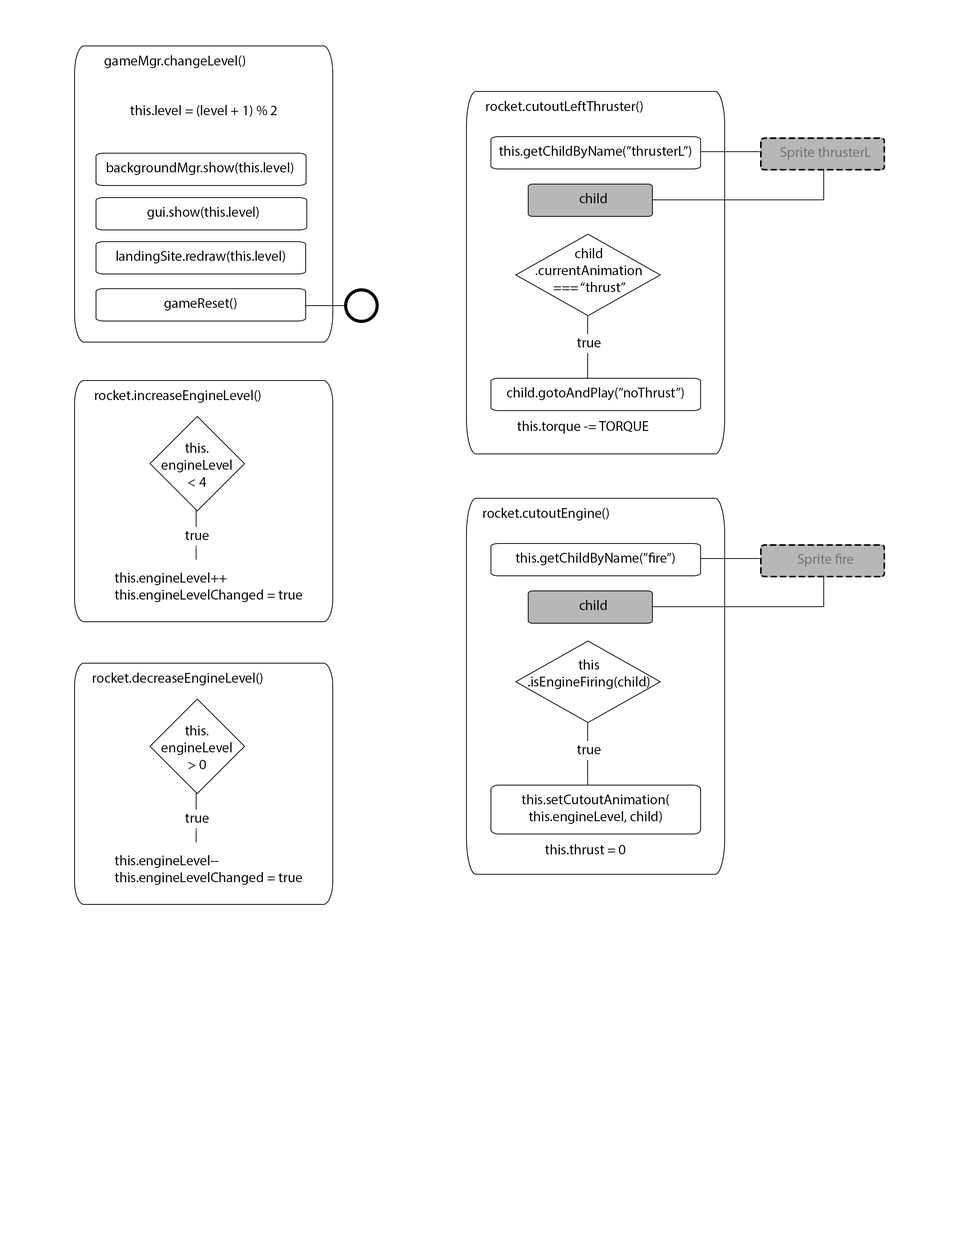
<style>
.page{position:relative;width:960px;height:1242px;background:#ffffff}
.page>*{position:absolute;margin:0}
.t1{font:14.1px "MyriadPro-Regular";color:#000000}
.t2{font:14.1px "MyriadPro-Regular";color:#737373}
</style>
<div class="page">
<p class="t1" style="left:104px;top:55px;width:141px;height:13px">gameMgr.changeLevel()</p>
<p class="t1" style="left:486px;top:101px;width:157px;height:12px">rocket.cutoutLeftThruster()</p>
<p class="t1" style="left:130px;top:105px;width:147px;height:12px">this.level = (level + 1) % 2</p>
<p class="t1" style="left:499px;top:146px;width:192px;height:13px">this.getChildByName(”thrusterL”)</p>
<p class="t2" style="left:780px;top:147px;width:91px;height:13px">Sprite thrusterL</p>
<p class="t1" style="left:107px;top:162px;width:186px;height:13px">backgroundMgr.show(this.level)</p>
<p class="t1" style="left:579px;top:193px;width:28px;height:10px">child</p>
<p class="t1" style="left:147px;top:207px;width:112px;height:12px">gui.show(this.level)</p>
<p class="t1" style="left:116px;top:251px;width:169px;height:13px">landingSite.redraw(this.level)</p>
<p class="t1" style="left:536px;top:248px;width:106px;height:44px;text-align:center">child<br>.currentAnimation<br>=== “thrust”</p>
<p class="t1" style="left:164px;top:298px;width:72px;height:13px">gameReset()</p>
<p class="t1" style="left:577px;top:338px;width:24px;height:9px">true</p>
<p class="t1" style="left:95px;top:390px;width:165px;height:13px">rocket.increaseEngineLevel()</p>
<p class="t1" style="left:507px;top:387px;width:177px;height:14px">child.gotoAndPlay(”noThrust”)</p>
<p class="t1" style="left:517px;top:421px;width:131px;height:13px">this.torque -= TORQUE</p>
<p class="t1" style="left:161px;top:443px;width:71px;height:44px;text-align:center">this.<br>engineLevel<br>&lt; 4</p>
<p class="t1" style="left:483px;top:508px;width:126px;height:13px">rocket.cutoutEngine()</p>
<p class="t1" style="left:185px;top:531px;width:24px;height:9px">true</p>
<p class="t1" style="left:516px;top:553px;width:159px;height:13px">this.getChildByName(”fire”)</p>
<p class="t2" style="left:798px;top:554px;width:55px;height:13px">Sprite fire</p>
<p class="t1" style="left:115px;top:573px;width:187px;height:29px">this.engineLevel++<br>this.engineLevelChanged = true</p>
<p class="t1" style="left:579px;top:600px;width:28px;height:10px">child</p>
<p class="t1" style="left:528px;top:660px;width:121px;height:29px;text-align:center">this<br>.isEngineFiring(child)</p>
<p class="t1" style="left:93px;top:673px;width:169px;height:12px">rocket.decreaseEngineLevel()</p>
<p class="t1" style="left:161px;top:725px;width:71px;height:44px;text-align:center">this.<br>engineLevel<br>&gt; 0</p>
<p class="t1" style="left:577px;top:745px;width:24px;height:9px">true</p>
<p class="t1" style="left:522px;top:794px;width:147px;height:30px;text-align:center">this.setCutoutAnimation(<br>this.engineLevel, child)</p>
<p class="t1" style="left:185px;top:813px;width:24px;height:10px">true</p>
<p class="t1" style="left:545px;top:844px;width:80px;height:11px">this.thrust = 0</p>
<p class="t1" style="left:115px;top:855px;width:187px;height:30px">this.engineLevel--<br>this.engineLevelChanged = true</p>
</div>
